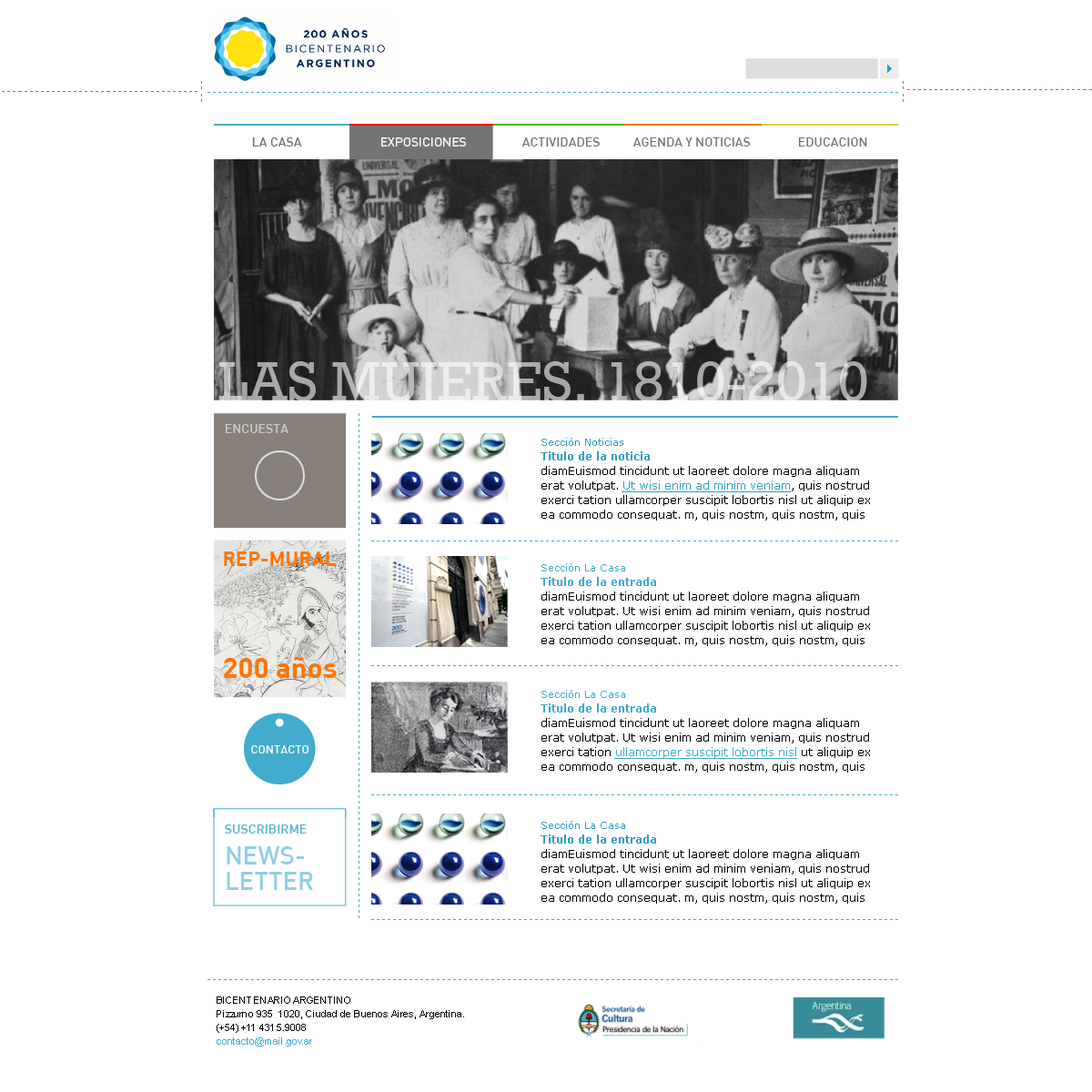
<style>
.page{position:relative;width:1092px;height:1092px;background:#ffffff}
.page>*{position:absolute;margin:0}
.t1{font:12.7px "DIN-Medium";color:#706e6e}
.t2{font:12.7px "DINPro-Regular";color:#ffffff}
.t3{font:12.7px "DIN-Medium";color:#747474}
.t4{font:12.7px "DIN-Medium";letter-spacing:-0.004em;color:#747474}
.t5{font:10.9px/14.6px "Verdana";color:#000000}
.t6{font:10px/14.6px "Verdana";color:#2da1c7}
.t7{font:10.9px/14.6px "Verdana-Bold";color:#2da1c7}
.t8{font:10.9px/14.6px "Verdana";color:#2da1c7;text-decoration:underline}
.t9{font:10px/14.6px "Verdana";color:#42abce}
.t10{font:10.9px/14.6px "Verdana-Bold";color:#42abce}
.t11{font:10.9px/14.6px "Verdana";color:#42abce;text-decoration:underline}
.t12{font:10px/13.6px "ArialMT";color:#000000}
.t13{font:10px/13.6px "ArialMT";color:#42abce}
</style>
<div class="page">
<p class="t1" style="left:252px;top:137px;width:50px;height:10px">LA CASA</p>
<p class="t2" style="left:381px;top:137px;width:85px;height:10px">EXPOSICIONES</p>
<p class="t3" style="left:522px;top:137px;width:78px;height:10px">ACTIVIDADES</p>
<p class="t4" style="left:633px;top:137px;width:118px;height:10px">AGENDA Y NOTICIAS</p>
<p class="t3" style="left:798px;top:137px;width:69px;height:10px">EDUCACION</p>
<p class="t5" style="left:541px;top:438px;width:329px;height:83px"><span class="t6">Sección Noticias<br></span><span class="t7">Titulo de la noticia<br></span>diamEuismod tincidunt ut laoreet dolore magna aliquam erat volutpat. <span class="t8">Ut wisi enim ad minim veniam</span>, quis nostrud exerci tation ullamcorper suscipit lobortis nisl ut aliquip ex ea commodo consequat. m, quis nostm, quis nostm, quis nostm, quis nost</p>
<p class="t5" style="left:541px;top:563px;width:329px;height:83px"><span class="t9">Sección La Casa<br></span><span class="t10">Titulo de la entrada<br></span>diamEuismod tincidunt ut laoreet dolore magna aliquam erat volutpat. Ut wisi enim ad minim veniam, quis nostrud exerci tation ullamcorper suscipit lobortis nisl ut aliquip ex ea commodo consequat. m, quis nostm, quis nostm, quis nostm, quis nost</p>
<p class="t5" style="left:541px;top:690px;width:329px;height:83px"><span class="t9">Sección La Casa<br></span><span class="t10">Titulo de la entrada<br></span>diamEuismod tincidunt ut laoreet dolore magna aliquam erat volutpat. Ut wisi enim ad minim veniam, quis nostrud exerci tation <span class="t11">ullamcorper suscipit lobortis nisl</span> ut aliquip ex ea commodo consequat. m, quis nostm, quis nostm, quis nostm, quis nost</p>
<p class="t5" style="left:541px;top:821px;width:329px;height:83px"><span class="t6">Sección La Casa<br></span><span class="t7">Titulo de la entrada<br></span>diamEuismod tincidunt ut laoreet dolore magna aliquam erat volutpat. Ut wisi enim ad minim veniam, quis nostrud exerci tation ullamcorper suscipit lobortis nisl ut aliquip ex ea commodo consequat. m, quis nostm, quis nostm, quis nostm, quis nost</p>
<p class="t12" style="left:217px;top:996px;width:247px;height:50px">BICENTENARIO ARGENTINO<br>Pizzurno 935  1020, Ciudad de Buenos Aires, Argentina.<br>(+54) +11 4315.9008 <br><span class="t13">contacto@mail.gov.ar</span></p>
</div>
